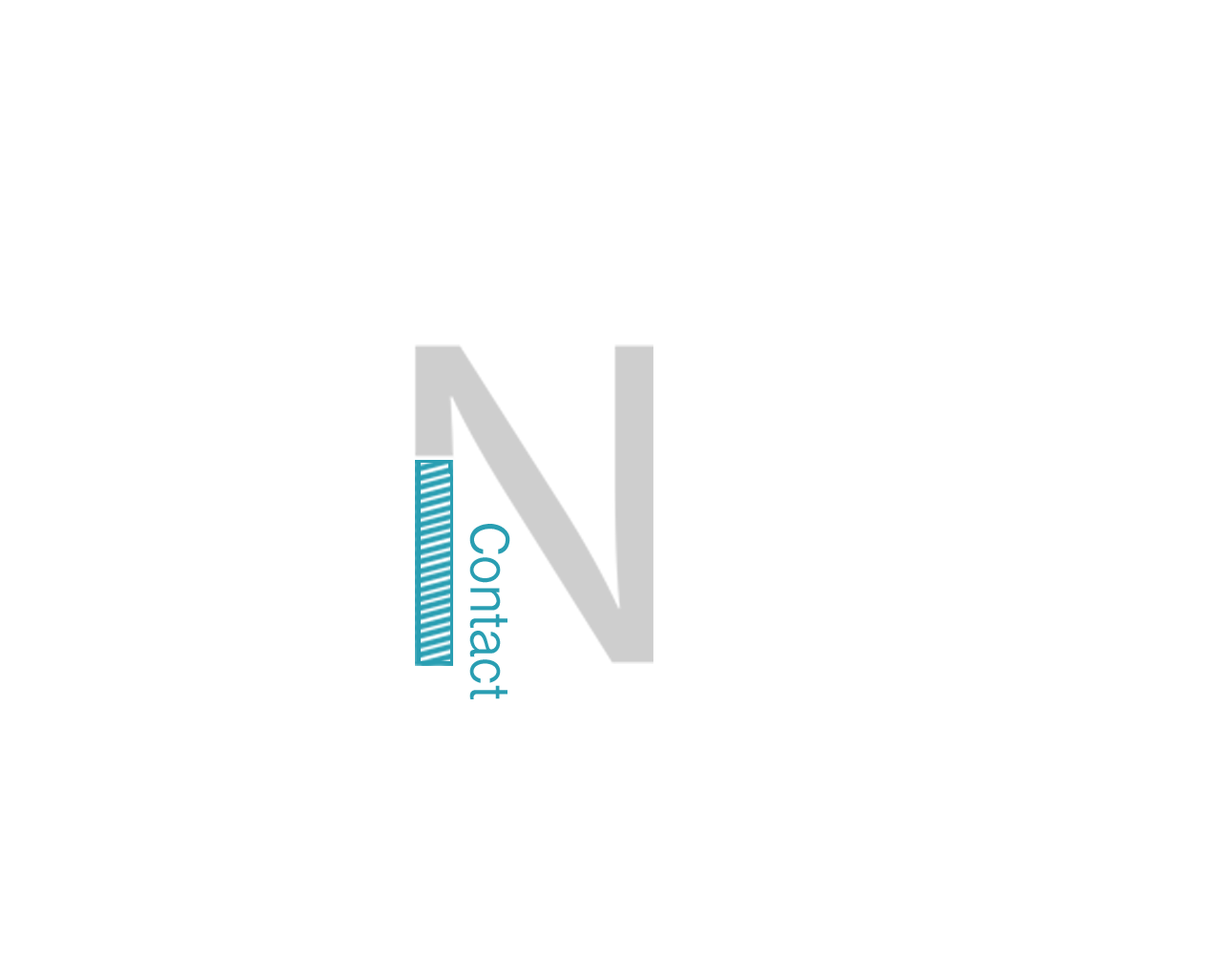
<style>
.page{position:relative;width:1221px;height:977px;background:#ffffff}
.page>*{position:absolute;margin:0}
.t1{font:58.3px "InaiMathi";color:#299eb2}
</style>
<div class="page">
<p class="t1" style="left:469px;top:524px;width:41px;height:175px;rotate:90deg">Contact</p>
</div>
